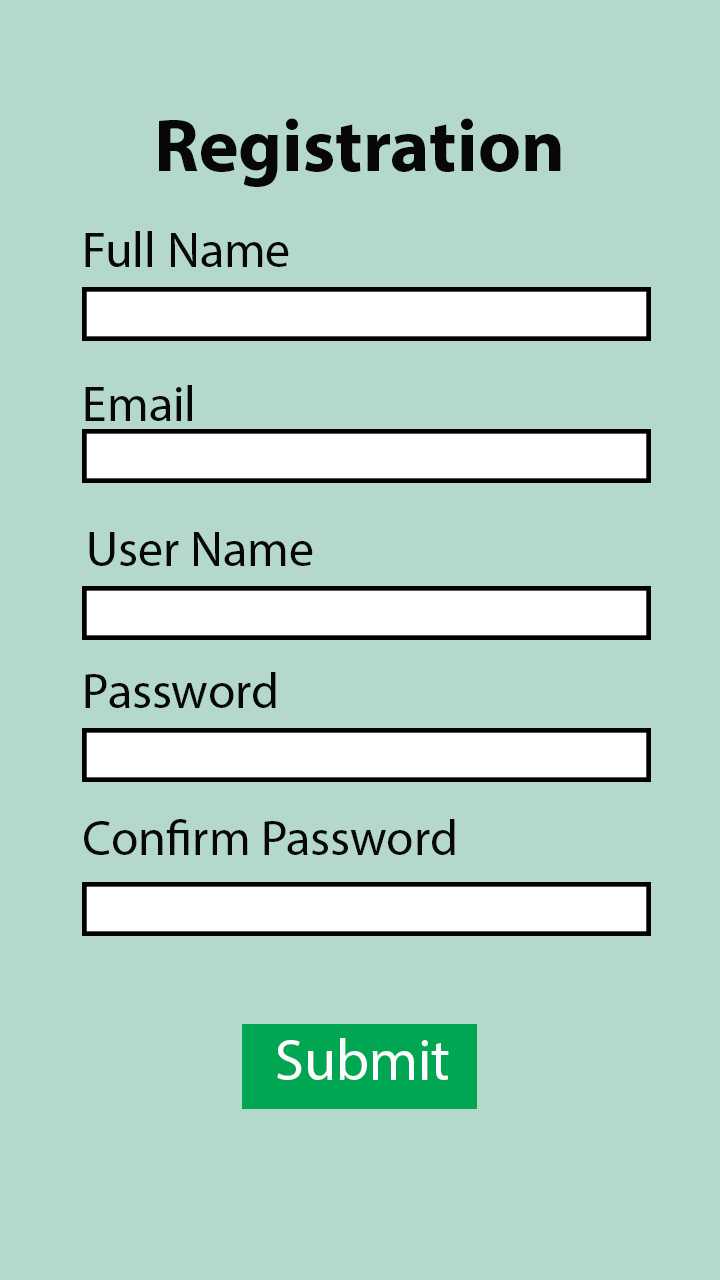
<style>
.page{position:relative;width:720px;height:1280px;background:#b4d9cc}
.page>*{position:absolute;margin:0}
.t1{font:75px "MyriadPro-Bold";color:#070707}
.t2{font:50px "MyriadPro-Regular";color:#070707}
.t3{font:58.3px "MyriadPro-Regular";color:#fdfdfd}
</style>
<div class="page">
<p class="t1" style="left:159px;top:118px;width:402px;height:69px">Registration</p>
<p class="t2" style="left:85px;top:231px;width:204px;height:36px">Full Name</p>
<p class="t2" style="left:85px;top:385px;width:107px;height:36px">Email</p>
<p class="t2" style="left:89px;top:532px;width:224px;height:34px">User Name</p>
<p class="t2" style="left:85px;top:672px;width:191px;height:36px">Password</p>
<p class="t2" style="left:84px;top:819px;width:371px;height:36px">Confirm Password</p>
<p class="t3" style="left:277px;top:1038px;width:172px;height:42px">Submit</p>
</div>
